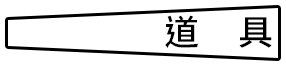
<style>
.page{position:relative;width:286px;height:66px;background:#ffffff}
.page>*{position:absolute;margin:0}
.t1{font:35px "NotoSansCJKtc-Medium";letter-spacing:0.06em;color:#000000}
</style>
<div class="page">
<p class="t1" style="left:165px;top:15px;width:107px;height:33px">道　具</p>
</div>
